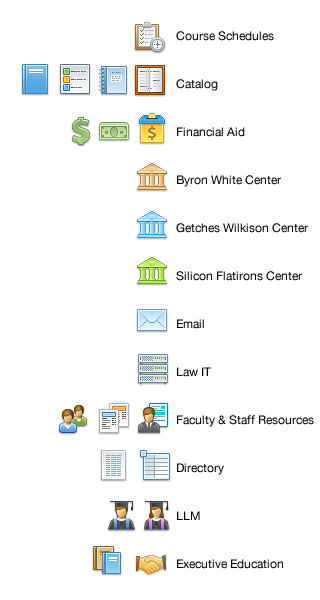
<style>
.page{position:relative;width:320px;height:600px;background:#ffffff}
.page>*{position:absolute;margin:0}
.t1{font:12px/48px "HelveticaNeue";color:#000000}
</style>
<div class="page">
<p class="t1" style="left:176px;top:31px;width:138px;height:538px">Course Schedules<br>Catalog<br>Financial Aid<br>Byron White Center<br>Getches Wilkison Center<br>Silicon Flatirons Center<br>Email<br>Law IT<br>Faculty &amp; Staff Resources<br>Directory<br>LLM<br>Executive Education</p>
</div>
